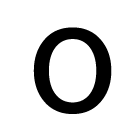
<style>
.page{position:relative;width:140px;height:140px;background:#ffffff}
.page>*{position:absolute;margin:0}
.t1{font:150px "Monaco";letter-spacing:-0.065em;color:#000000}
</style>
<div class="page">
<p class="t1" style="left:33px;top:27px;width:79px;height:87px">o</p>
</div>
